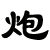
<style>
.page{position:relative;width:50px;height:50px;background:#ffffff}
.page>*{position:absolute;margin:0}
.t1{font:48px "STBaoliTC-Regular";color:#010100}
</style>
<div class="page">
<p class="t1" style="left:1px;top:10px;width:48px;height:30px">炮</p>
</div>
